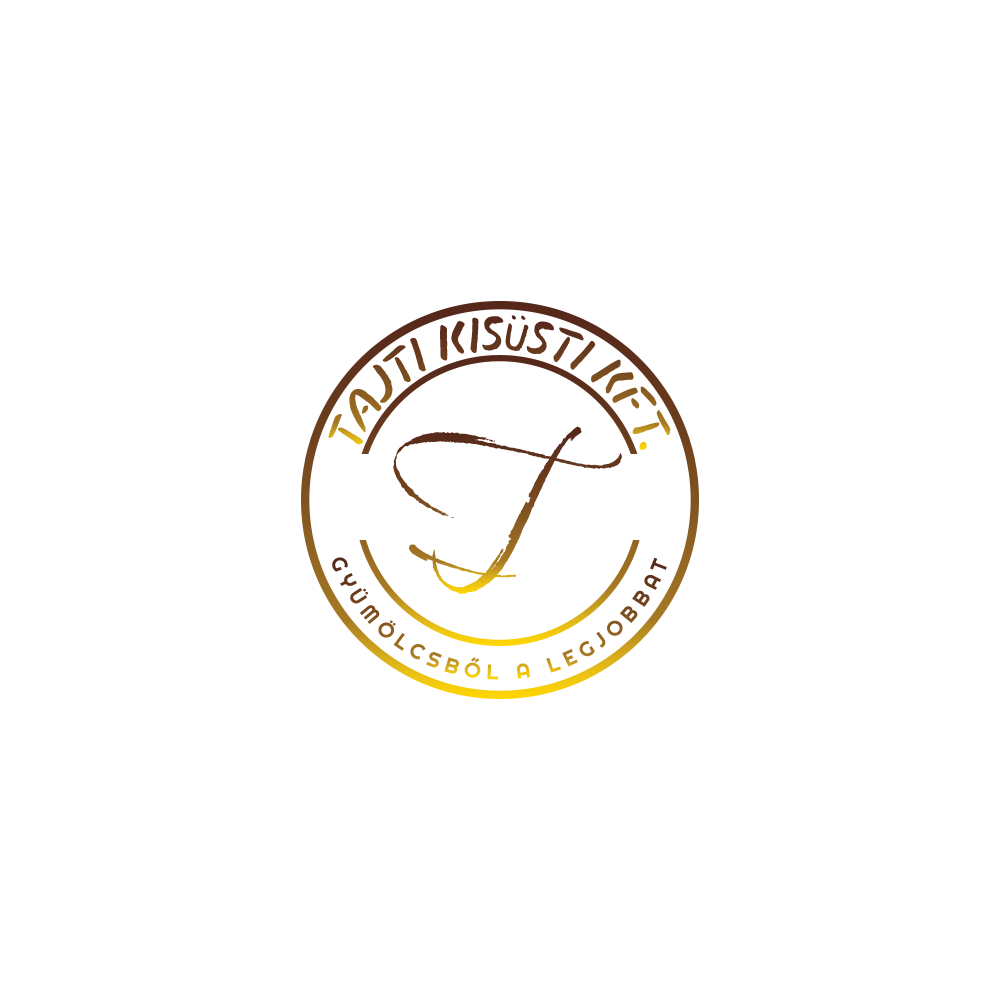
<style>
.page{position:relative;width:1000px;height:1000px;background:#ffffff}
.page>*{position:absolute;margin:0}
.t1{font:66.7px "SlacksideOne-Regular";letter-spacing:-0.1em;text-transform:uppercase}
.t2{font:250px "Babylonica-Regular";text-transform:uppercase}
.t3{font:20.8px "Righteous-Regular";letter-spacing:0.3em;text-transform:uppercase;scale:1.03 1}
</style>
<div class="page">
<p class="t1" style="left:328px;top:315px;width:343px;height:135px;text-align:center">TAJTI KISÜSTI KFT.</p>
<p class="t2" style="left:393px;top:426px;width:229px;height:168px">T</p>
<p class="t3" style="left:332px;top:557px;width:335px;height:123px;rotate:-180deg">gyümölcsből a legjobbat</p>
</div>
